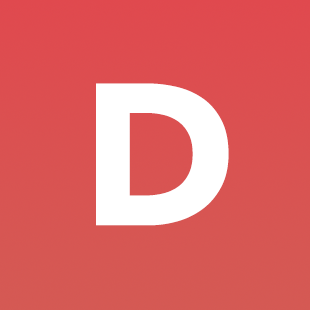
<style>
.page{position:relative;width:310px;height:310px}
.page>*{position:absolute;margin:0}
.t1{font:200px "AvenirNext-Bold";letter-spacing:0.14em;color:#ffffff}
</style>
<div class="page">
<p class="t1" style="left:96px;top:83px;width:133px;height:143px">D</p>
</div>
